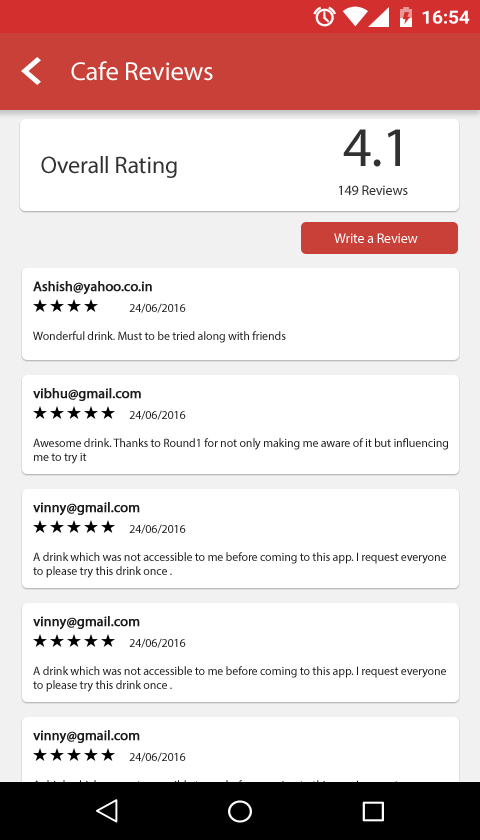
<style>
.page{position:relative;width:480px;height:840px;background:#ffffff}
.page>*{position:absolute;margin:0}
.t1{font:26.1px "MyriadPro-Regular";letter-spacing:-0.01em;color:#ffffff;scale:1.03 1}
.t2{font:56px "MyriadPro-Regular";letter-spacing:-0.01em;color:#313131}
.t3{font:24px "MyriadPro-Regular";letter-spacing:-0.01em;color:#313131}
.t4{font:14px "MyriadPro-Regular";letter-spacing:-0.01em;color:#313131}
.t5{font:14px "MyriadPro-Regular";letter-spacing:-0.01em;color:#ffffff}
.t6{font:14px "MyriadPro-Regular";letter-spacing:-0.01em;color:#1b1b1b;font-weight:bold}
.t7{font:12px "MyriadPro-Regular";letter-spacing:-0.01em;color:#1b1b1b}
</style>
<div class="page">
<p class="t1" style="left:71px;top:61px;width:142px;height:20px">Cafe Reviews</p>
<p class="t2" style="left:343px;top:129px;width:57px;height:38px">4.1</p>
<p class="t3" style="left:41px;top:156px;width:136px;height:22px">Overall Rating</p>
<p class="t4" style="left:339px;top:185px;width:69px;height:10px">149 Reviews</p>
<p class="t5" style="left:334px;top:233px;width:84px;height:10px">Write a Review</p>
<p class="t6" style="left:33px;top:281px;width:119px;height:14px">Ashish@yahoo.co.in</p>
<p class="t7" style="left:129px;top:303px;width:57px;height:10px">24/06/2016</p>
<p class="t7" style="left:33px;top:331px;width:253px;height:12px">Wonderful drink. Must to be tried along with friends</p>
<p class="t6" style="left:33px;top:388px;width:108px;height:13px">vibhu@gmail.com</p>
<p class="t7" style="left:129px;top:410px;width:57px;height:10px">24/06/2016</p>
<p class="t7" style="left:33px;top:438px;width:415px;height:26px">Awesome drink. Thanks to Round1 for not only making me aware of it but influencing <br>me to try it</p>
<p class="t6" style="left:33px;top:502px;width:107px;height:14px">vinny@gmail.com</p>
<p class="t7" style="left:129px;top:524px;width:57px;height:10px">24/06/2016</p>
<p class="t7" style="left:33px;top:552px;width:413px;height:26px">A drink which was not accessible to me before coming to this app. I request everyone <br>to please try this drink once .</p>
<p class="t6" style="left:33px;top:616px;width:107px;height:14px">vinny@gmail.com</p>
<p class="t7" style="left:129px;top:638px;width:57px;height:10px">24/06/2016</p>
<p class="t7" style="left:33px;top:666px;width:413px;height:26px">A drink which was not accessible to me before coming to this app. I request everyone <br>to please try this drink once .</p>
<p class="t6" style="left:33px;top:730px;width:107px;height:14px">vinny@gmail.com</p>
<p class="t7" style="left:129px;top:752px;width:57px;height:10px">24/06/2016</p>
</div>
